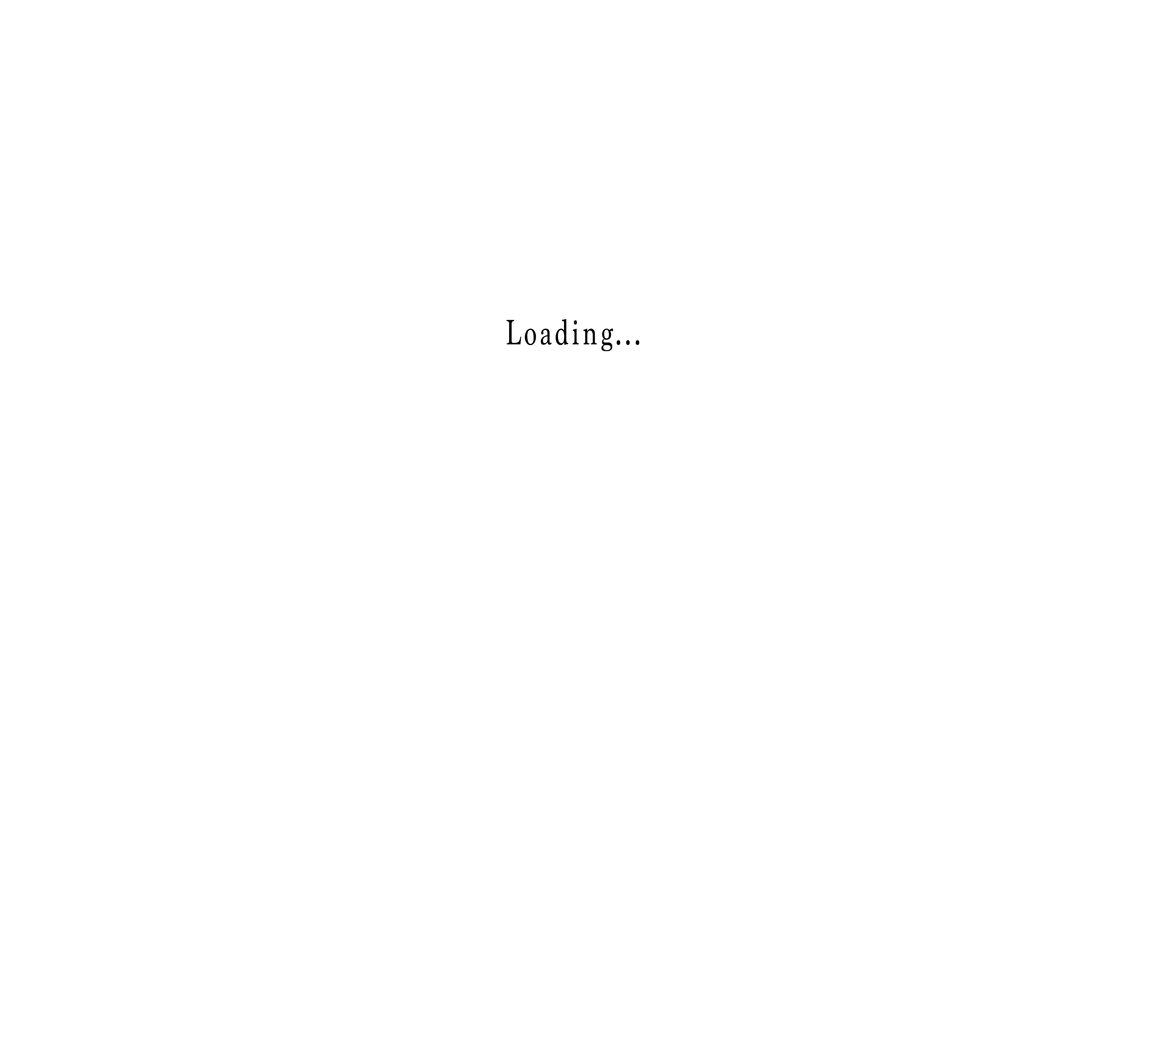
<style>
.page{position:relative;width:1149px;height:1038px;background:#ffffff}
.page>*{position:absolute;margin:0}
.t1{font:36.9px "Marion-Regular";letter-spacing:0.12em;color:#000000;scale:0.73 1}
</style>
<div class="page">
<p class="t1" style="left:506px;top:319px;width:134px;height:32px">Loading...</p>
</div>
